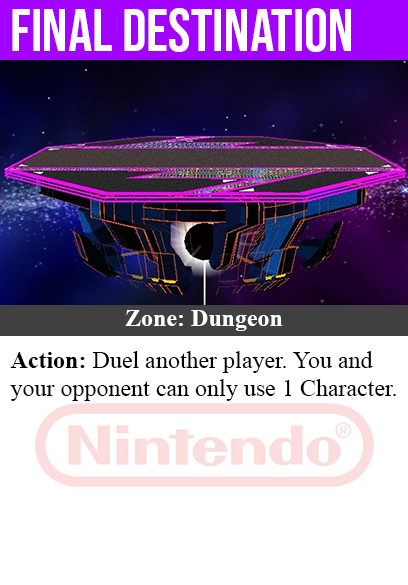
<style>
.page{position:relative;width:408px;height:585px;background:#ffffff}
.page>*{position:absolute;margin:0}
.t1{font:60px "BebasNeue-Regular";color:#ffffff}
.t2{font:24px "TimesNewRomanPS-BoldMT";color:#ffffff}
.t3{font:24px "TimesNewRomanPSMT";color:#000000}
.t4{font:24px "TimesNewRomanPS-BoldMT";color:#000000}
</style>
<div class="page">
<p class="t1" style="left:12px;top:8px;width:339px;height:44px">final destination</p>
<p class="t2" style="left:125px;top:310px;width:158px;height:21px">Zone: Dungeon</p>
<p class="t3" style="left:10px;top:351px;width:386px;height:50px"><span class="t4">Action:</span> Duel another player. You and<br>your opponent can only use 1 Character.</p>
</div>
